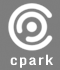
<style>
.page{position:relative;width:60px;height:70px;background:#7e7e7e}
.page>*{position:absolute;margin:0}
.t1{font:14px "Monda-Bold";letter-spacing:0.1em;color:#ffffff}
</style>
<div class="page">
<p class="t1" style="left:10px;top:54px;width:43px;height:14px">cpark</p>
</div>
